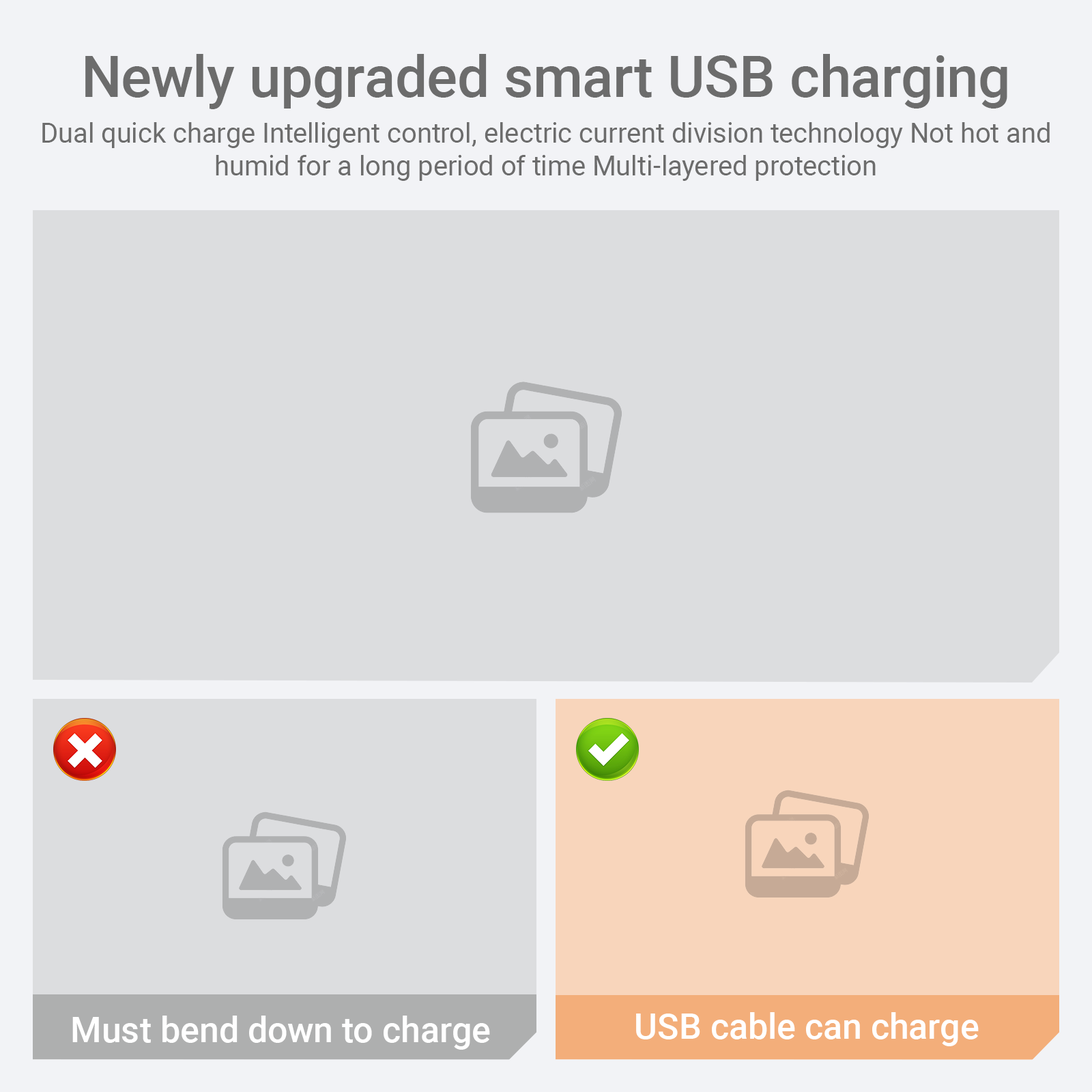
<style>
.page{position:relative;width:1092px;height:1092px;background:#dcdddf}
.page>*{position:absolute;margin:0}
.t1{font:57.3px "Roboto-Medium";color:#6c6c6c}
.t2{font:27.3px "Roboto-Regular";color:#6c6c6c}
.t3{font:35.5px "Roboto-Medium";color:#ffffff}
</style>
<div class="page">
<p class="t1" style="left:85px;top:54px;width:922px;height:55px">Newly upgraded smart USB charging</p>
<p class="t2" style="left:42px;top:122px;width:1008px;height:59px;text-align:center">Dual quick charge Intelligent control, electric current division technology Not hot and humid for a long period of time Multi-layered protection</p>
<p class="t3" style="left:636px;top:1012px;width:343px;height:34px">USB cable can charge</p>
<p class="t3" style="left:72px;top:1016px;width:418px;height:34px">Must bend down to charge</p>
</div>
